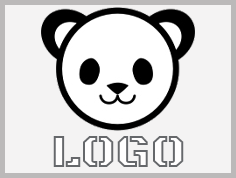
<style>
.page{position:relative;width:236px;height:178px;background:#f4f3f3}
.page>*{position:absolute;margin:0}
.t1{font:48.5px "BlackOpsOne-Regular";text-transform:uppercase}
</style>
<div class="page">
<p class="t1" style="left:53px;top:136px;width:131px;height:31px">LOGO</p>
</div>
